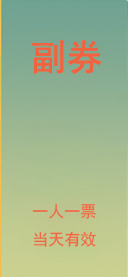
<style>
.page{position:relative;width:128px;height:277px}
.page>*{position:absolute;margin:0}
.t1{font:36px "SimHei";color:#f1633f}
.t2{font:16px "SimHei";color:#f16644}
</style>
<div class="page">
<p class="t1" style="left:32px;top:40px;width:70px;height:34px">副券</p>
<p class="t1" style="left:32px;top:40px;width:70px;height:34px">副券</p>
<p class="t1" style="left:32px;top:40px;width:70px;height:34px">副券</p>
<p class="t2" style="left:32px;top:203px;width:64px;height:44px">一人一票<br>当天有效</p>
</div>
